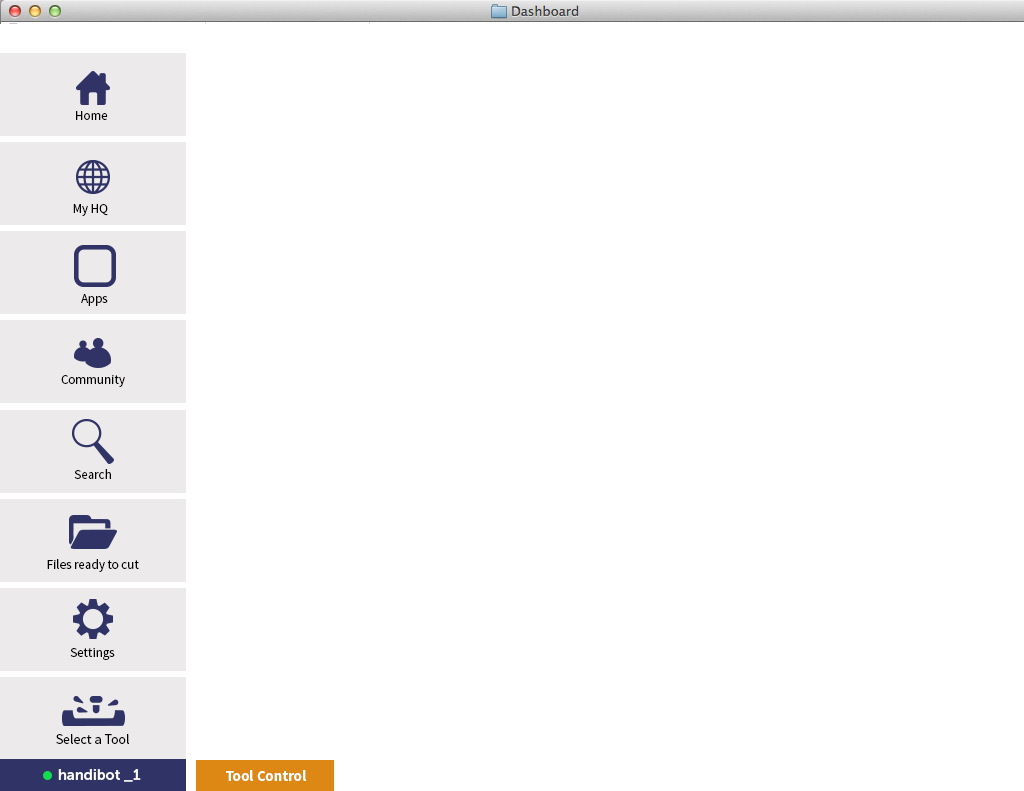
<style>
.page{position:relative;width:1024px;height:791px;background:#ffffff}
.page>*{position:absolute;margin:0}
.t1{font:13px "SourceSansPro-Regular";color:#000000}
.t2{font:14px "SourceSansPro-Regular";color:#000000}
.t3{font:15px "MuseoSans-700";letter-spacing:-0.01em;color:#ffffff}
.t4{font:15px "SourceSansPro-Bold";color:#ffffff}
</style>
<div class="page">
<p class="t1" style="left:76px;top:111px;width:32px;height:9px">Home</p>
<p class="t1" style="left:73px;top:204px;width:35px;height:12px">My HQ</p>
<p class="t1" style="left:81px;top:294px;width:27px;height:12px">Apps</p>
<p class="t1" style="left:61px;top:375px;width:64px;height:12px">Community</p>
<p class="t1" style="left:74px;top:469px;width:37px;height:10px">Search</p>
<p class="t1" style="left:47px;top:559px;width:92px;height:13px">Files ready to cut</p>
<p class="t1" style="left:70px;top:648px;width:45px;height:12px">Settings</p>
<p class="t2" style="left:56px;top:734px;width:73px;height:10px">Select a Tool</p>
<p class="t3" style="left:58px;top:769px;width:83px;height:13px">handibot _1</p>
<p class="t4" style="left:226px;top:770px;width:81px;height:11px">Tool Control</p>
</div>
